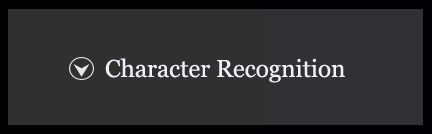
<style>
.page{position:relative;width:432px;height:134px;background:#313030}
.page>*{position:absolute;margin:0}
.t1{font:24.5px "Georgia";letter-spacing:-0.005em;color:#f0effb}
</style>
<div class="page">
<p class="t1" style="left:105px;top:58px;width:240px;height:25px">Character Recognition</p>
</div>
